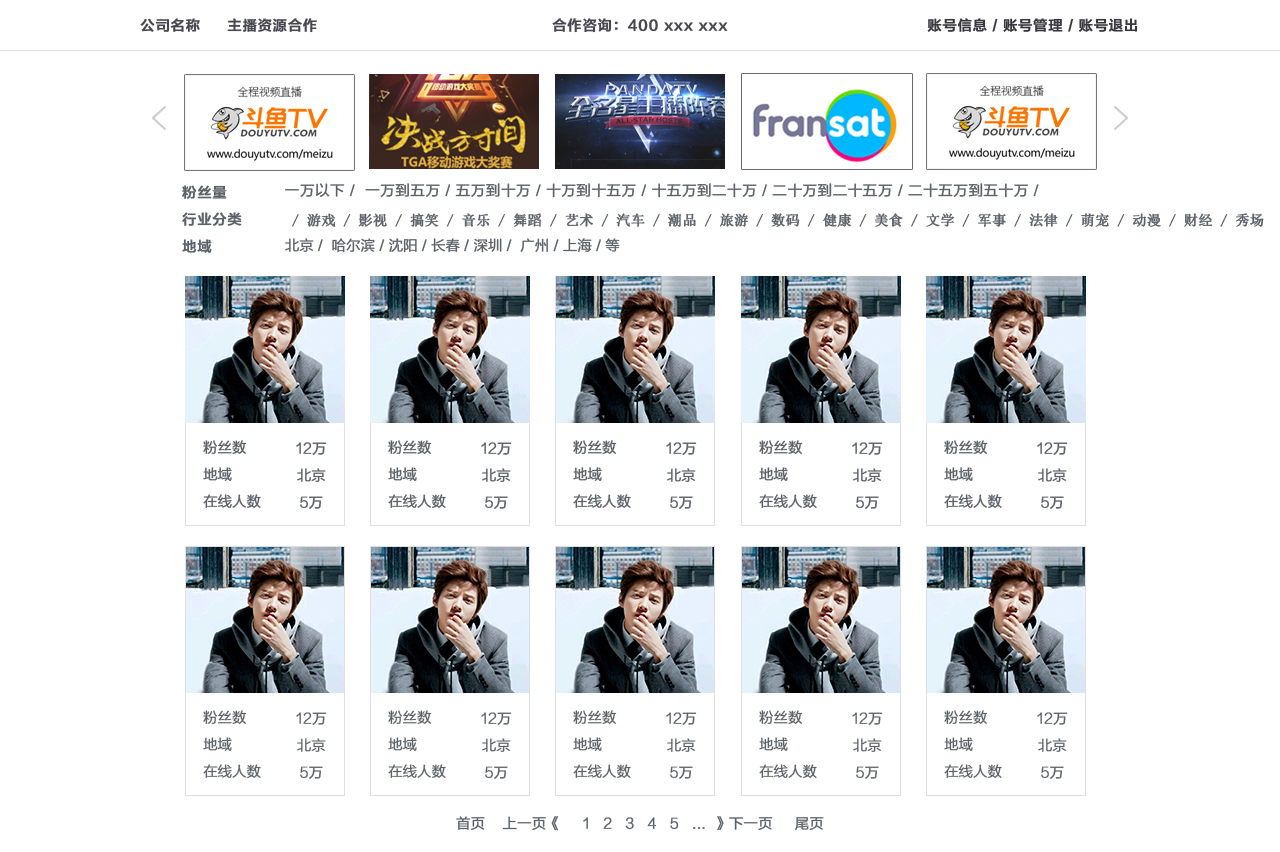
<style>
.page{position:relative;width:1280px;height:852px;background:#ffffff}
.page>*{position:absolute;margin:0}
.t1{font:14px "FZLTZHK--GBK1-0";letter-spacing:0.05em;color:#484850;font-weight:bold}
.t2{font:14px "FZLTZHK--GBK1-0";letter-spacing:0.05em;color:#39383f;font-weight:bold}
.t3{font:14px/27px "FZLTZHK--GBK1-0";letter-spacing:0.05em;color:#5c626a;font-weight:bold}
.t4{font:14px "FZLTXHK--GBK1-0";letter-spacing:0.05em;color:#5c626a;font-weight:bold}
.t5{font:14px "SimSun";letter-spacing:0.01em;color:#5c626a;font-weight:bold}
.t6{font:14px "FZLTXHK--GBK1-0";letter-spacing:0.01em;color:#5c626a;font-weight:bold}
.t7{font:14px/27px "FZLTXHK--GBK1-0";letter-spacing:0.01em;color:#5c626a;font-weight:bold}
</style>
<div class="page">
<p class="t1" style="left:140px;top:18px;width:60px;height:14px">公司名称</p>
<p class="t1" style="left:227px;top:18px;width:90px;height:15px">主播资源合作</p>
<p class="t1" style="left:552px;top:18px;width:176px;height:15px">合作咨询：400 xxx xxx</p>
<p class="t2" style="left:927px;top:18px;width:211px;height:14px">账号信息 / 账号管理 / 账号退出</p>
<p class="t3" style="left:182px;top:185px;width:60px;height:68px">粉丝量<br>行业分类<br>地域</p>
<p class="t4" style="left:285px;top:183px;width:754px;height:15px">一万以下 /  一万到五万 / 五万到十万 / 十万到十五万 / 十五万到二十万 / 二十万到二十五万 / 二十五万到五十万 /</p>
<p class="t5" style="left:292px;top:213px;width:972px;height:14px">/ 游戏 / 影视 / 搞笑 / 音乐 / 舞蹈 / 艺术 / 汽车 / 潮品 / 旅游 / 数码 / 健康 / 美食 / 文学 / 军事 / 法律 / 萌宠 / 动漫 / 财经 / 秀场</p>
<p class="t6" style="left:285px;top:238px;width:335px;height:15px">北京 /  哈尔滨 / 沈阳 / 长春 / 深圳 /  广州 / 上海 / 等</p>
<p class="t7" style="left:203px;top:440px;width:58px;height:68px">粉丝数<br>地域<br>在线人数</p>
<p class="t7" style="left:296px;top:442px;width:31px;height:67px;text-align:center">12万<br>北京<br>5万</p>
<p class="t7" style="left:388px;top:440px;width:58px;height:68px">粉丝数<br>地域<br>在线人数</p>
<p class="t7" style="left:481px;top:442px;width:31px;height:67px;text-align:center">12万<br>北京<br>5万</p>
<p class="t7" style="left:573px;top:440px;width:58px;height:68px">粉丝数<br>地域<br>在线人数</p>
<p class="t7" style="left:666px;top:442px;width:31px;height:67px;text-align:center">12万<br>北京<br>5万</p>
<p class="t7" style="left:759px;top:440px;width:58px;height:68px">粉丝数<br>地域<br>在线人数</p>
<p class="t7" style="left:852px;top:442px;width:31px;height:67px;text-align:center">12万<br>北京<br>5万</p>
<p class="t7" style="left:944px;top:440px;width:58px;height:68px">粉丝数<br>地域<br>在线人数</p>
<p class="t7" style="left:1037px;top:442px;width:31px;height:67px;text-align:center">12万<br>北京<br>5万</p>
<p class="t6" style="left:456px;top:816px;width:368px;height:15px">首页    上一页《     1   2   3   4   5   ...  》下一页     尾页</p>
</div>
